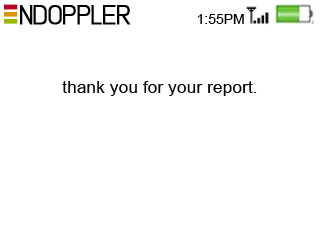
<style>
.page{position:relative;width:320px;height:240px;background:#ffffff}
.page>*{position:absolute;margin:0}
.t1{font:46.4px "Lintel";letter-spacing:-0.05em;color:#000000;font-variant:small-caps;font-weight:bold}
.t2{font:46.4px "Lintel";color:#ffffff;font-variant:small-caps}
.t3{font:24px "ArialMT";color:#000000}
.t4{font:30px "ArialMT";color:#000000}
</style>
<div class="page">
<p class="t1" style="left:20px;top:5px;width:111px;height:20px"><span class="t2">  </span>NDOPPLER</p>
<p class="t3" style="left:197px;top:14px;width:47px;height:10px">1:55PM</p>
<p class="t4" style="left:62px;top:81px;width:195px;height:15px">thank you for your report.</p>
</div>
